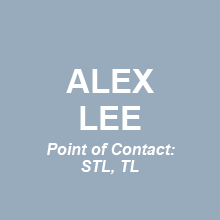
<style>
.page{position:relative;width:220px;height:220px;background:#98abbc}
.page>*{position:absolute;margin:0}
.t1{font:33px "Arial-BoldMT";color:#ffffff}
.t2{font:16px "Arial-BoldItalicMT";color:#ffffff}
</style>
<div class="page">
<p class="t1" style="left:66px;top:69px;width:88px;height:24px">ALEX</p>
<p class="t1" style="left:80px;top:106px;width:61px;height:24px">LEE</p>
<p class="t2" style="left:47px;top:143px;width:128px;height:12px">Point of Contact:</p>
<p class="t2" style="left:81px;top:160px;width:58px;height:14px">STL, TL</p>
</div>
